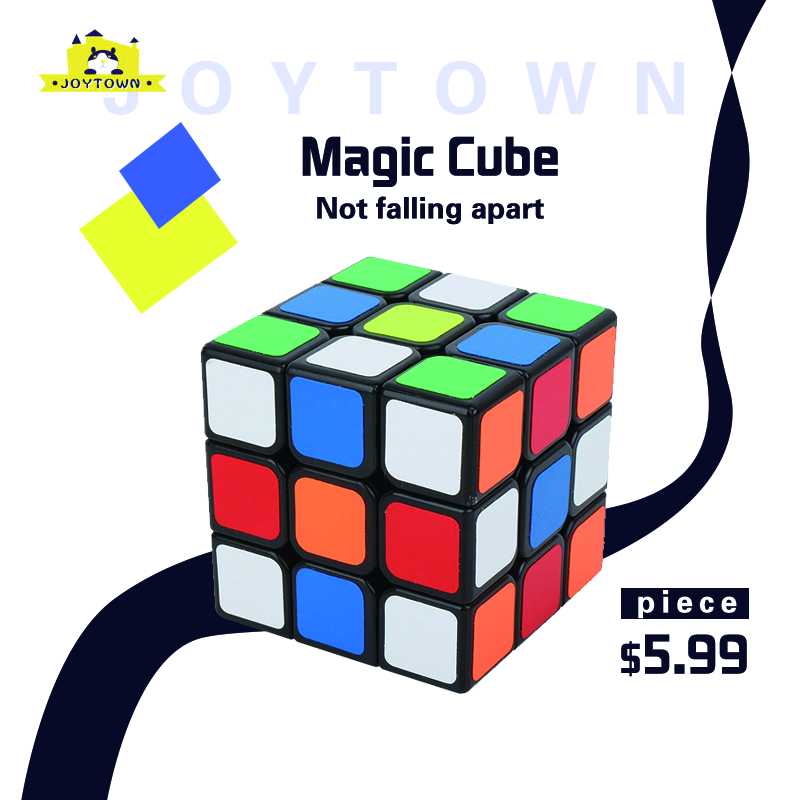
<style>
.page{position:relative;width:800px;height:800px;background:#ffffff}
.page>*{position:absolute;margin:0}
.t1{font:72px "FZDHTJW--GB1-0";letter-spacing:0.5em;color:#e2e8ff}
.t2{font:48px "FZHZGBJW--GB1-0";color:#070a27}
.t3{font:29.5px "FZDHTJW--GB1-0";color:#070a27}
.t4{font:30.9px "FZDHTJW--GB1-0";letter-spacing:0.2em;color:#ffffff}
.t5{font:36px "FZHZGBJW--GB1-0";color:#070a27}
</style>
<div class="page">
<p class="t1" style="left:103px;top:60px;width:581px;height:55px">JOYTOWN</p>
<p class="t2" style="left:302px;top:136px;width:256px;height:51px">Magic Cube</p>
<p class="t3" style="left:317px;top:196px;width:227px;height:29px">Not falling apart</p>
<p class="t4" style="left:638px;top:590px;width:99px;height:29px">piece</p>
<p class="t2" style="left:621px;top:634px;width:126px;height:43px"><span class="t5">$</span>5.99</p>
</div>
